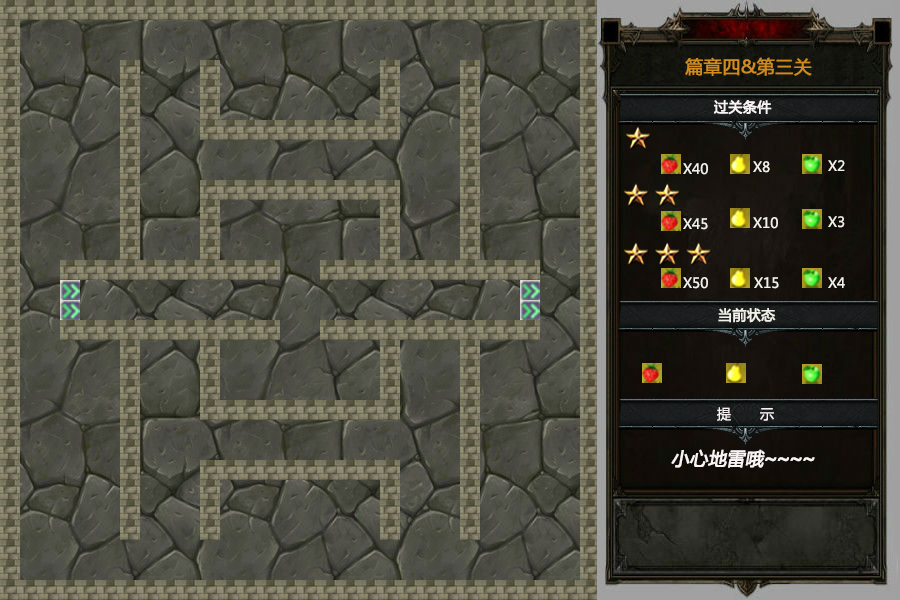
<style>
.page{position:relative;width:900px;height:600px}
.page>*{position:absolute;margin:0}
.t1{font:18px "MicrosoftYaHei";color:#cf8b20;font-weight:bold}
.t2{font:14px "MicrosoftYaHei";color:#f9f3f3;font-weight:bold}
.t3{font:14px "MicrosoftYaHei";color:#f1f0e9}
.t4{font:14px "MicrosoftYaHei";color:#f1f0e9;font-weight:bold}
.t5{font:14px "MicrosoftYaHei";color:#f9f3f3}
.t6{font:18px "MicrosoftYaHei";color:#f9f3f3;font-weight:bold;font-style:italic}
.t7{font:18px "AdobeHeitiStd-Regular";color:#f9f3f3;font-weight:bold;font-style:italic}
</style>
<div class="page">
<p class="t1" style="left:685px;top:57px;width:127px;height:19px">篇章四&amp;第三关</p>
<p class="t2" style="left:714px;top:100px;width:58px;height:15px">过关条件</p>
<p class="t3" style="left:753px;top:161px;width:17px;height:12px">X8</p>
<p class="t3" style="left:828px;top:160px;width:17px;height:11px">X2</p>
<p class="t3" style="left:683px;top:163px;width:25px;height:12px">X40</p>
<p class="t3" style="left:683px;top:218px;width:25px;height:12px">X45</p>
<p class="t3" style="left:753px;top:217px;width:25px;height:12px">X10</p>
<p class="t3" style="left:828px;top:216px;width:17px;height:12px">X3</p>
<p class="t3" style="left:683px;top:277px;width:25px;height:12px">X50</p>
<p class="t3" style="left:754px;top:277px;width:25px;height:12px">X15</p>
<p class="t3" style="left:828px;top:277px;width:17px;height:11px">X4</p>
<p class="t4" style="left:718px;top:308px;width:58px;height:15px">当前状态</p>
<p class="t5" style="left:717px;top:407px;width:57px;height:14px">提       示</p>
<p class="t6" style="left:671px;top:449px;width:144px;height:19px">小心地雷哦<span class="t7">~~~~</span></p>
</div>
